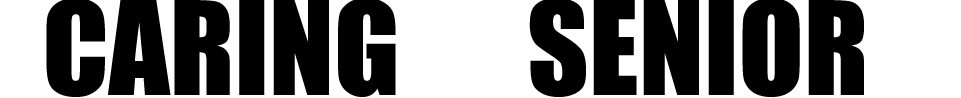
<style>
.page{position:relative;width:961px;height:98px;background:#000000}
.page>*{position:absolute;margin:0}
.t1{font:120px "Impact";color:#000000}
</style>
<div class="page">
<p class="t1" style="left:46px;top:0px;width:818px;height:97px">CARING      SENIOR</p>
</div>
